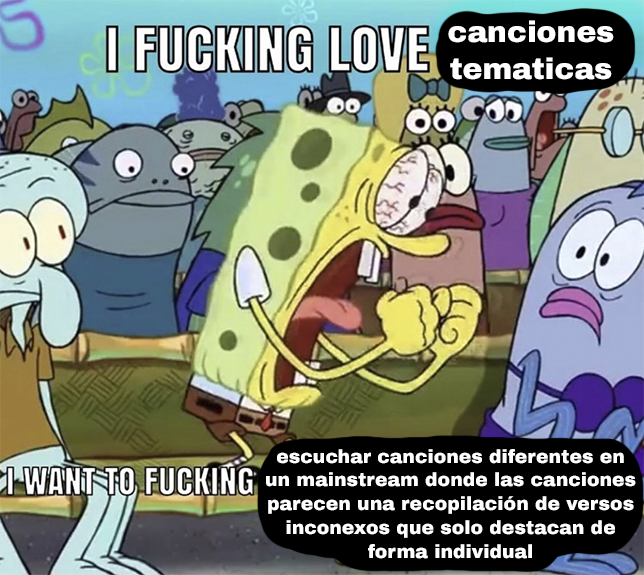
<style>
.page{position:relative;width:644px;height:575px}
.page>*{position:absolute;margin:0}
.t1{font:29.7px "ArchivoBlack-Regular";color:#ffffff}
.t2{font:18.8px "ArchivoBlack-Regular";color:#ffffff}
</style>
<div class="page">
<p class="t1" style="left:448px;top:20px;width:166px;height:60px;text-align:center">canciones<br>tematicas</p>
<p class="t2" style="left:266px;top:449px;width:370px;height:110px;text-align:center">escuchar canciones diferentes en<br>un mainstream donde las canciones<br>parecen una recopilación de versos<br>inconexos que solo destacan de<br>forma individual</p>
</div>
